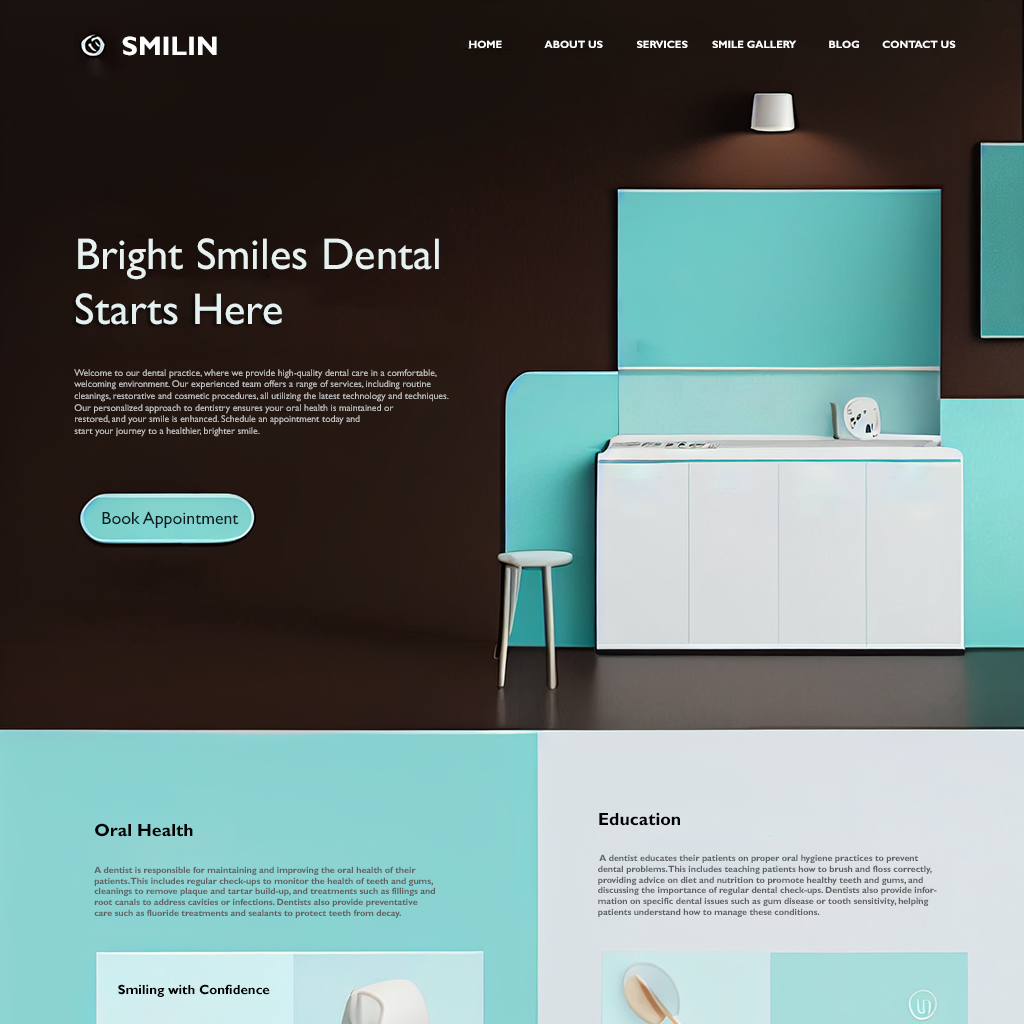
<style>
.page{position:relative;width:1024px;height:1024px}
.page>*{position:absolute;margin:0}
.t1{font:26.7px "GillSansMT-Bold";color:#ffffff}
.t2{font:10.4px "GillSansMT-Bold";color:#ffffff}
.t3{font:44.6px "GillSansMT";color:#e7f2f0}
.t4{font:44.6px "GillSansMT";color:#e5f1f1}
.t5{font:9.7px "GillSansMT";color:#c8c8c8}
.t6{font:17.8px "GillSansMT";color:#111c20}
.t7{font:17.8px "GillSansMT-Bold";color:#000000}
.t8{font:8.9px "GillSansMT-Bold";color:#626262}
.t9{font:13.4px "GillSansMT-Bold";color:#000000}
</style>
<div class="page">
<p class="t1" style="left:122px;top:36px;width:95px;height:20px">SMILIN</p>
<p class="t2" style="left:469px;top:40px;width:33px;height:8px">HOME</p>
<p class="t2" style="left:544px;top:40px;width:59px;height:8px">ABOUT US</p>
<p class="t2" style="left:637px;top:40px;width:51px;height:8px">SERVICES</p>
<p class="t2" style="left:712px;top:40px;width:85px;height:8px">SMILE GALLERY</p>
<p class="t2" style="left:829px;top:40px;width:30px;height:8px">BLOG</p>
<p class="t2" style="left:882px;top:40px;width:74px;height:8px">CONTACT US</p>
<p class="t3" style="left:78px;top:238px;width:361px;height:42px">Bright Smiles Dental</p>
<p class="t4" style="left:75px;top:293px;width:207px;height:32px">Starts Here</p>
<p class="t5" style="left:74px;top:369px;width:375px;height:68px">Welcome to our dental practice, where we provide high-quality dental care in a comfortable, welcoming environment. Our experienced team offers a range of services, including routine cleanings, restorative and cosmetic procedures, all utilizing the latest technology and techniques. <br>Our personalized approach to dentistry ensures your oral health is maintained or <br>restored, and your smile is enhanced. Schedule an appointment today and <br>start your journey to a healthier, brighter smile.</p>
<p class="t6" style="left:102px;top:511px;width:137px;height:17px">Book Appointment</p>
<p class="t7" style="left:599px;top:812px;width:81px;height:14px">Education</p>
<p class="t7" style="left:95px;top:823px;width:98px;height:14px">Oral Health</p>
<p class="t8" style="left:598px;top:854px;width:339px;height:63px">A dentist educates their patients on proper oral hygiene practices to prevent dental problems. This includes teaching patients how to brush and floss correctly, providing advice on diet and nutrition to promote healthy teeth and gums, and discussing the importance of regular dental check-ups. Dentists also provide information on specific dental issues such as gum disease or tooth sensitivity, helping patients understand how to manage these conditions.</p>
<p class="t8" style="left:94px;top:866px;width:341px;height:52px">A dentist is responsible for maintaining and improving the oral health of their patients. This includes regular check-ups to monitor the health of teeth and gums, cleanings to remove plaque and tartar build-up, and treatments such as fillings and root canals to address cavities or infections. Dentists also provide preventative care such as fluoride treatments and sealants to protect teeth from decay.</p>
<p class="t9" style="left:118px;top:984px;width:152px;height:13px">Smiling with Confidence</p>
</div>
